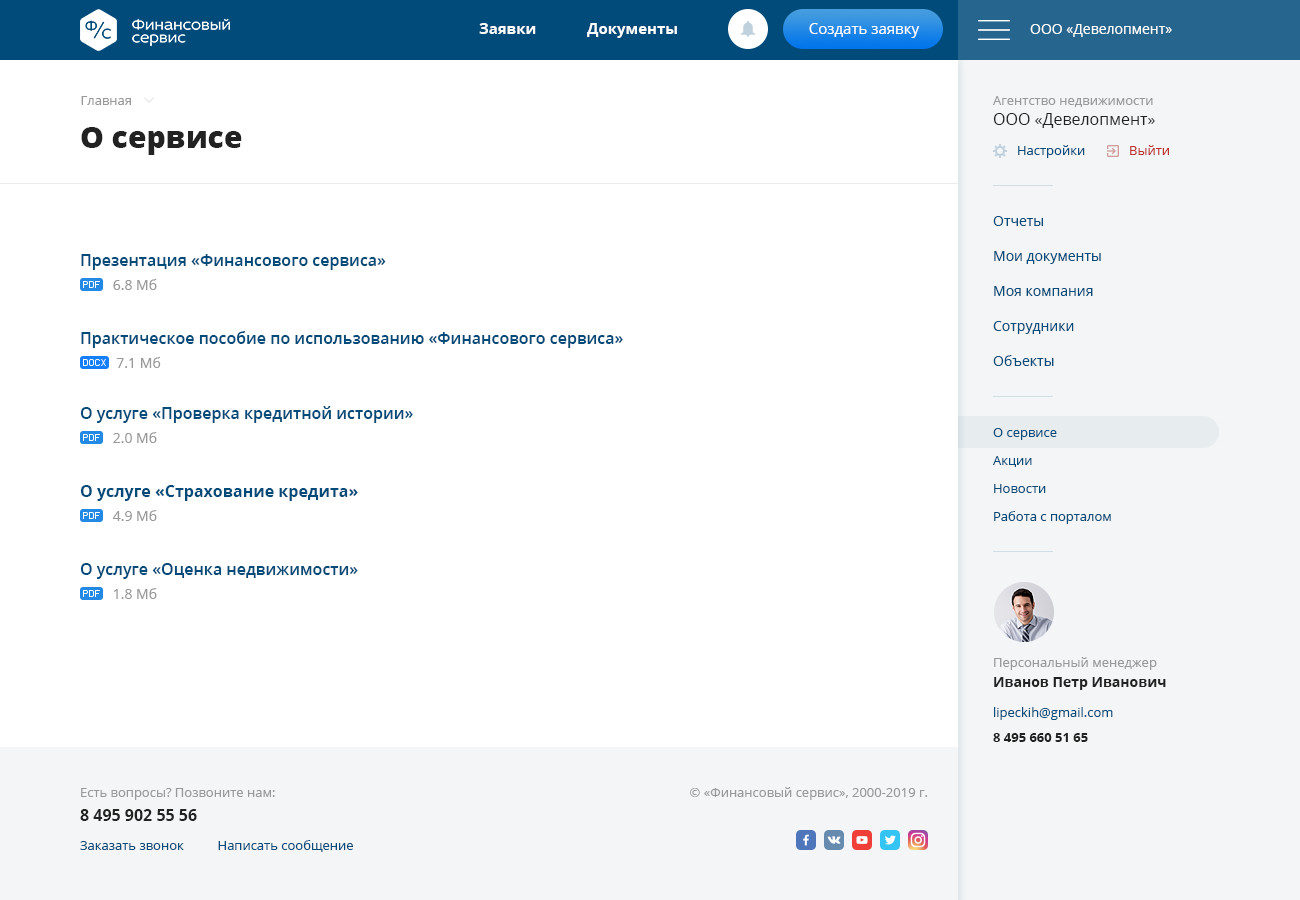
<style>
.page{position:relative;width:1300px;height:900px;background:#ffffff}
.page>*{position:absolute;margin:0}
.t1{font:15px "OpenSans-Bold";color:#ffffff}
.t2{font:15px "OpenSans";color:#ffffff}
.t3{font:14px "OpenSans";color:#ffffff}
.t4{font:13px "OpenSans";color:#999999}
.t5{font:16px/20px "OpenSans";color:#222222}
.t6{font:30px "OpenSans-Extrabold";color:#222222}
.t7{font:13px "OpenSans";color:#004b7a}
.t8{font:13px "OpenSans";color:#be3030}
.t9{font:14px/35px "OpenSans";color:#004b7a}
.t10{font:16px "OpenSans-Semibold";color:#004b7a}
.t11{font:14px/24px "OpenSans";color:#999999}
.t12{font:13px/28px "OpenSans";color:#004b7a}
.t13{font:16px "OpenSans-Bold";color:#004b7a}
.t14{font:14px/20px "OpenSans-Bold";color:#222222}
.t15{font:13px "OpenSans-Bold";color:#222222}
.t16{font:13px/24px "OpenSans";color:#999999}
.t17{font:16px/24px "OpenSans-Bold";color:#222222}
</style>
<div class="page">
<p class="t1" style="left:479px;top:23px;width:198px;height:15px">Заявки             Документы</p>
<p class="t2" style="left:809px;top:23px;width:111px;height:15px">Создать заявку</p>
<p class="t3" style="left:1030px;top:24px;width:142px;height:13px">ООО «Девелопмент»</p>
<p class="t4" style="left:81px;top:96px;width:50px;height:9px">Главная</p>
<p class="t4" style="left:993px;top:96px;width:162px;height:32px">Агентство недвижимости<br><span class="t5">ООО «Девелопмент»</span></p>
<p class="t6" style="left:81px;top:127px;width:161px;height:28px">О сервисе</p>
<p class="t7" style="left:1018px;top:145px;width:151px;height:13px">Настройки             <span class="t8">Выйти</span></p>
<p class="t9" style="left:993px;top:216px;width:108px;height:150px">Отчеты<br>Мои документы<br>Моя компания<br>Сотрудники<br>Объекты</p>
<p class="t10" style="left:81px;top:254px;width:305px;height:36px">Презентация «Финансового сервиса»<br><span class="t11">         6.8 Мб</span></p>
<p class="t10" style="left:81px;top:331px;width:542px;height:37px">Практическое пособие по использованию «Финансового сервиса»<br><span class="t11">          7.1 Мб</span></p>
<p class="t10" style="left:80px;top:406px;width:333px;height:37px">О услуге «Проверка кредитной истории»<br><span class="t11">         2.0 Мб</span></p>
<p class="t12" style="left:993px;top:428px;width:118px;height:96px">О сервисе<br>Акции<br>Новости<br>Работа с порталом</p>
<p class="t13" style="left:81px;top:485px;width:277px;height:36px">О услуге «Страхование кредита»<br><span class="t11">         4.9 Мб</span></p>
<p class="t10" style="left:80px;top:563px;width:278px;height:36px">О услуге «Оценка недвижимости»<br><span class="t11">         1.8 Мб</span></p>
<p class="t4" style="left:994px;top:657px;width:172px;height:33px">Персональный менеджер<br><span class="t14">Иванов Петр Иванович</span></p>
<p class="t7" style="left:994px;top:707px;width:119px;height:13px">lipeckih@gmail.com</p>
<p class="t15" style="left:993px;top:733px;width:95px;height:9px">8 495 660 51 65</p>
<p class="t16" style="left:80px;top:788px;width:195px;height:33px">Есть вопросы? Позвоните нам:<br><span class="t17">8 495 902 55 56</span></p>
<p class="t4" style="left:690px;top:787px;width:238px;height:13px">© «Финансовый сервис», 2000-2019 г.</p>
<p class="t7" style="left:80px;top:840px;width:273px;height:12px">Заказать звонок          Написать сообщение</p>
</div>
